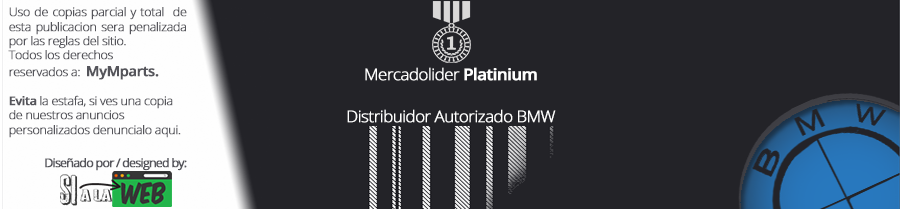
<style>
.page{position:relative;width:900px;height:209px;background:#232328}
.page>*{position:absolute;margin:0}
.t1{font:12px "OpenSans-Light";letter-spacing:-0.05em;color:#55555b;font-weight:bold;scale:1.04 1}
.t2{font:14px "OpenSans-Semibold";letter-spacing:-0.05em;color:#55555b;font-weight:bold;scale:1.04 1}
.t3{font:12px "OpenSans-Semibold";letter-spacing:-0.05em;color:#55555b;font-weight:bold;scale:1.04 1}
.t4{font:16px "OpenSans-Light";letter-spacing:-0.05em;color:#ffffff;font-weight:bold;scale:1.04 1}
.t5{font:16px "OpenSans-Semibold";letter-spacing:-0.05em;color:#ffffff;font-weight:bold;scale:1.04 1}
.t6{font:12px "OpenSans";letter-spacing:-0.09em;color:#55555b;font-weight:bold;scale:1.04 1}
</style>
<div class="page">
<p class="t1" style="left:8px;top:7px;width:179px;height:131px;text-align:justify">Uso de copias parcial y total  de esta publicacion sera penalizada por las reglas del sitio.<br>Todos los derechos <br>reservados a:  <span class="t2">MyMparts.<br></span><span class="t3"><br>Evita </span>la estafa, si ves una copia de nuestros anuncios personalizados denuncialo aqui.</p>
<p class="t4" style="left:365px;top:67px;width:172px;height:14px">Mercadolider <span class="t5">Platinium</span></p>
<p class="t4" style="left:347px;top:109px;width:209px;height:14px">Distribuidor Autorizado BMW</p>
<p class="t6" style="left:45px;top:158px;width:142px;height:13px">Diseñado por / designed by:</p>
</div>
